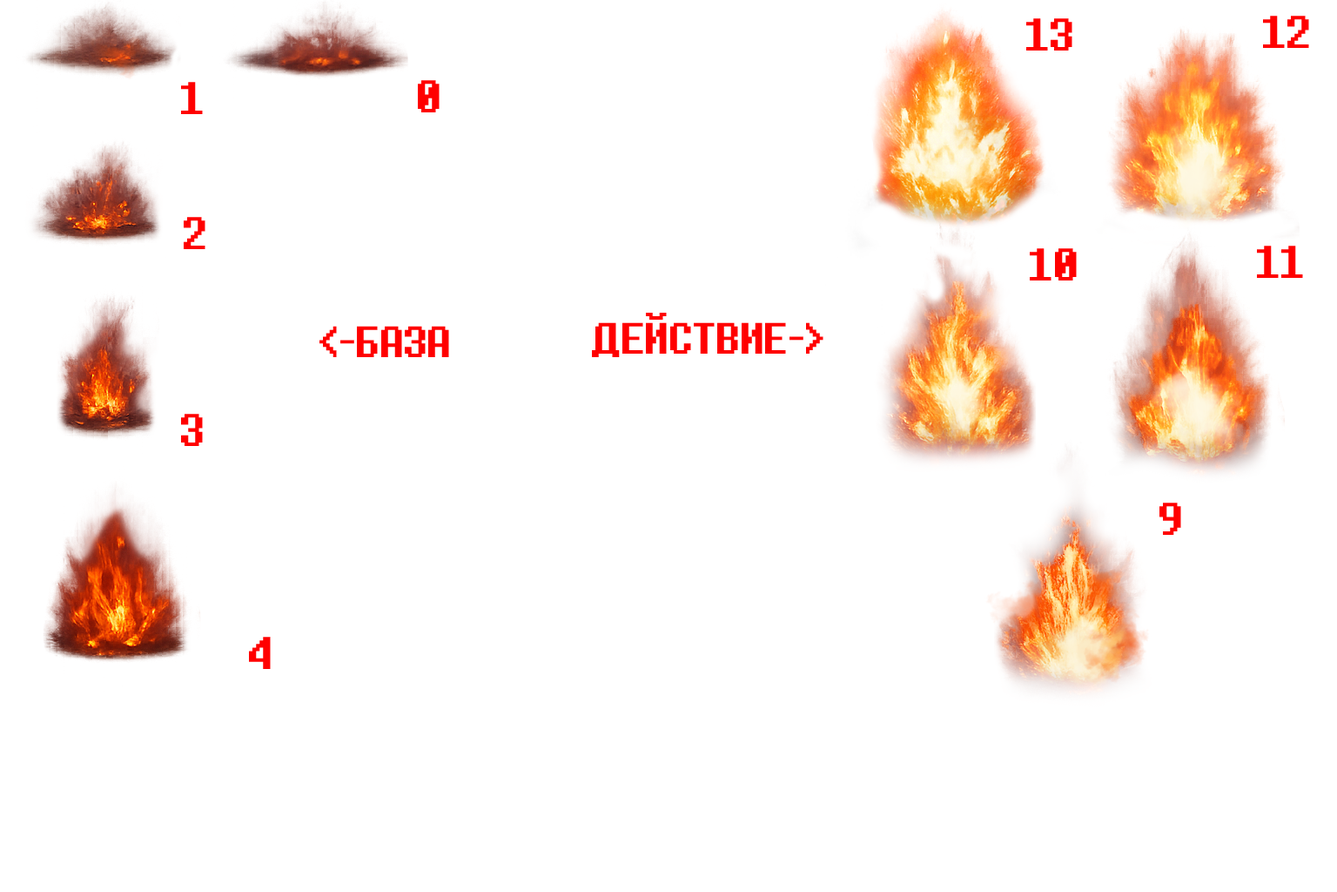
<style>
.page{position:relative;width:1337px;height:892px;background:#ffffff}
.page>*{position:absolute;margin:0}
.t1{font:57px "8bitoperatorJVERUS-Regular";color:#ff0000}
.t2{font:54.5px "8bitoperatorJVERUS-Regular";color:#ff0000}
</style>
<div class="page">
<p class="t1" style="left:1263px;top:16px;width:47px;height:32px">12</p>
<p class="t1" style="left:1027px;top:18px;width:46px;height:33px">13</p>
<p class="t1" style="left:181px;top:82px;width:22px;height:32px">1</p>
<p class="t1" style="left:418px;top:80px;width:22px;height:32px">0</p>
<p class="t1" style="left:184px;top:217px;width:21px;height:32px">2</p>
<p class="t1" style="left:1257px;top:246px;width:46px;height:32px">11</p>
<p class="t1" style="left:1030px;top:248px;width:47px;height:32px">10</p>
<p class="t2" style="left:592px;top:313px;width:232px;height:44px">ДЕЙСТВИЕ-&gt;</p>
<p class="t2" style="left:320px;top:326px;width:129px;height:31px">&lt;-БАЗА</p>
<p class="t1" style="left:181px;top:414px;width:22px;height:32px">3</p>
<p class="t1" style="left:1160px;top:502px;width:22px;height:33px">9</p>
<p class="t1" style="left:249px;top:636px;width:22px;height:33px">4</p>
</div>
